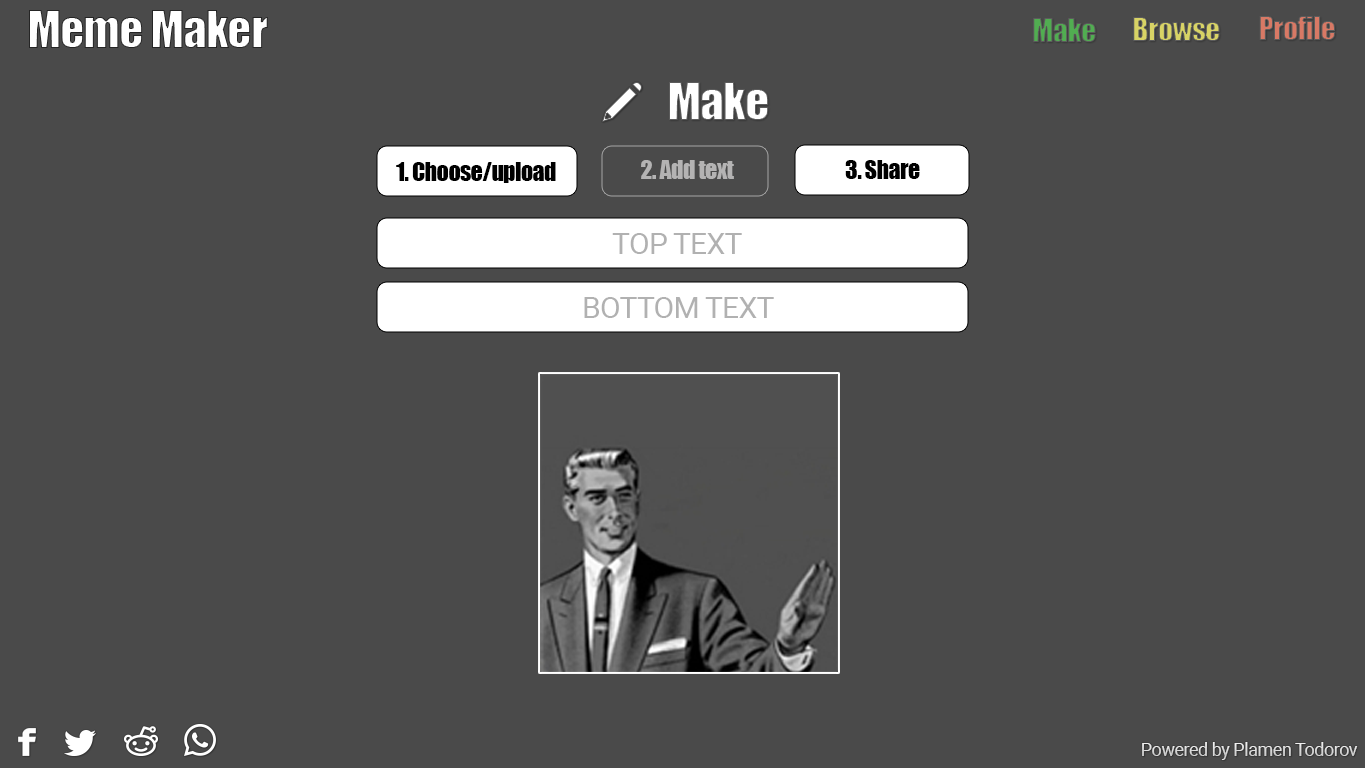
<style>
.page{position:relative;width:1366px;height:768px;background:#4a4a4a}
.page>*{position:absolute;margin:0}
.t1{font:48px "Impact";letter-spacing:-0.025em;color:#ffffff}
.t2{font:30px "Impact";letter-spacing:-0.025em}
.t3{font:24.5px "Impact";letter-spacing:-0.025em;color:#b4b3b3}
.t4{font:24.5px "Impact";letter-spacing:-0.025em;color:#000000}
.t5{font:30px "Roboto-Regular";letter-spacing:-0.025em;color:#b1b1b1}
.t6{font:18px "Roboto-Regular";letter-spacing:-0.025em;color:#dddddd}
</style>
<div class="page">
<p class="t1" style="left:29px;top:10px;width:239px;height:38px">Meme Maker</p>
<p class="t2" style="left:1133px;top:17px;width:87px;height:24px">Browse</p>
<p class="t2" style="left:1259px;top:16px;width:76px;height:24px">Profile</p>
<p class="t2" style="left:1033px;top:18px;width:63px;height:24px">Make</p>
<p class="t1" style="left:669px;top:82px;width:100px;height:38px">Make</p>
<p class="t3" style="left:641px;top:160px;width:93px;height:19px">2. Add text</p>
<p class="t4" style="left:845px;top:160px;width:75px;height:19px">3. Share</p>
<p class="t4" style="left:396px;top:162px;width:160px;height:21px">1. Choose/upload</p>
<p class="t5" style="left:612px;top:233px;width:130px;height:21px">TOP TEXT</p>
<p class="t5" style="left:584px;top:297px;width:190px;height:21px">BOTTOM TEXT</p>
<p class="t6" style="left:1142px;top:742px;width:216px;height:18px">Powered by Plamen Todorov</p>
</div>
